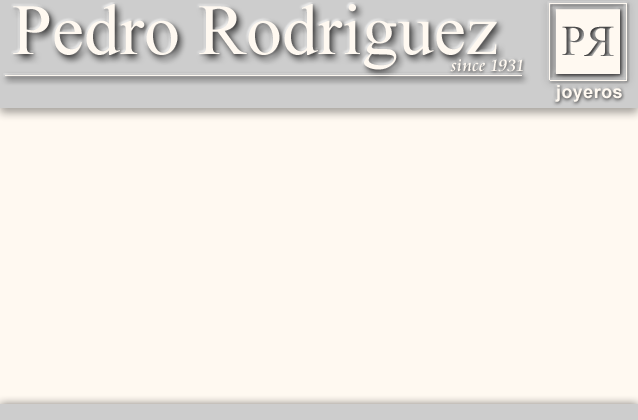
<style>
.page{position:relative;width:638px;height:420px;background:#fff9f1}
.page>*{position:absolute;margin:0}
.t1{font:72px "TimesNewRomanPSMT";color:#fff9f1}
.t2{font:18px "CataneoBT-Regular";letter-spacing:0.025em;color:#fff9f1}
.t3{font:18px "Arial-BoldMT";letter-spacing:0.025em;color:#fff9f1}
</style>
<div class="page">
<p class="t1" style="left:13px;top:4px;width:484px;height:66px">Pedro Rodriguez</p>
<p class="t2" style="left:450px;top:59px;width:73px;height:13px">since 1931</p>
<p class="t3" style="left:555px;top:85px;width:67px;height:17px">joyeros</p>
</div>
